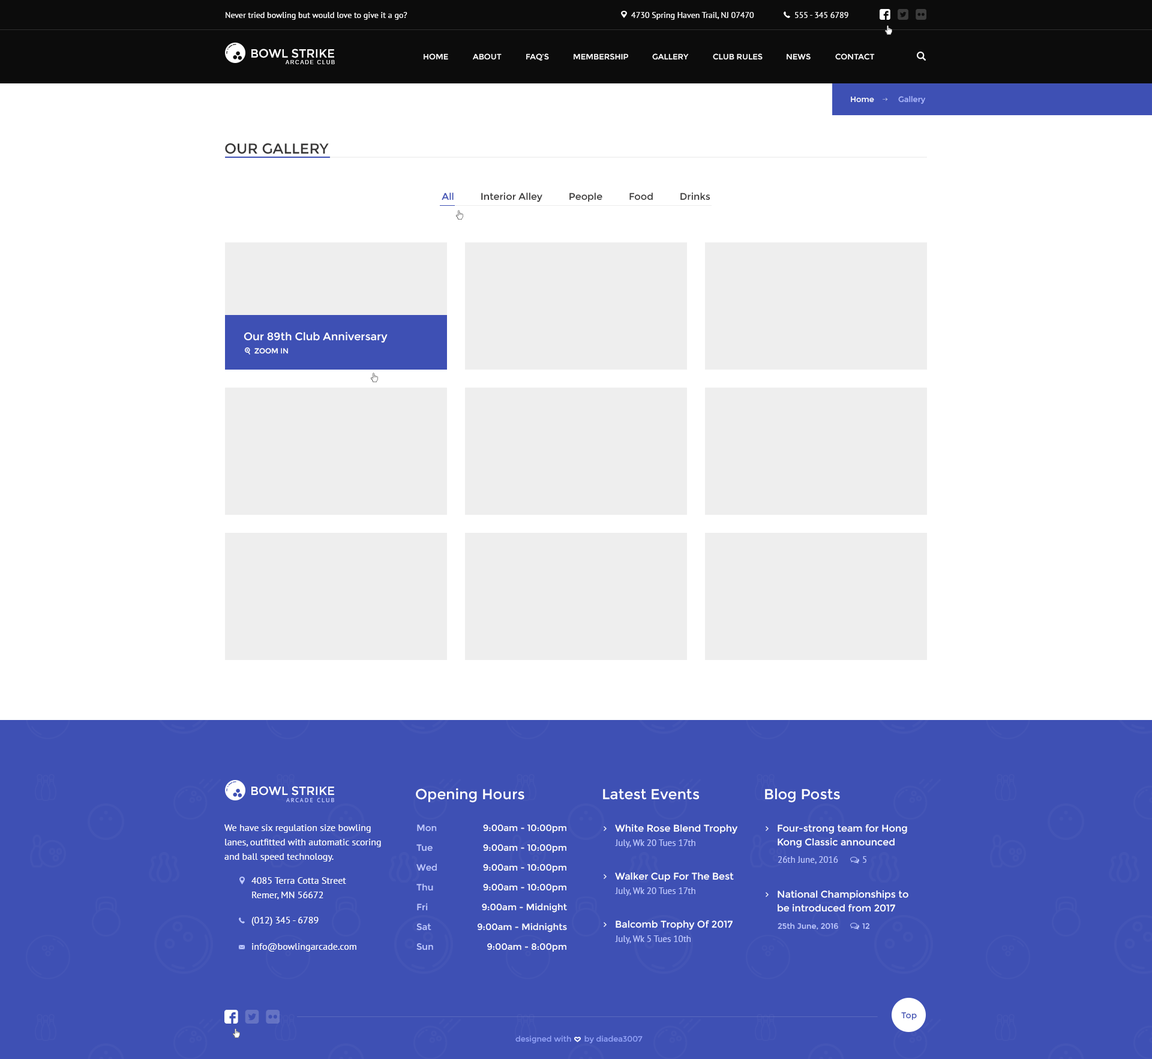
<style>
.page{position:relative;width:1152px;height:1059px;background:#ffffff}
.page>*{position:absolute;margin:0}
.t1{font:8.4px "PTSans-Regular";color:#ffffff}
.t2{font:12px "Montserrat-Regular";color:#ffffff;text-transform:uppercase}
.t3{font:7.8px "Montserrat-Regular";color:#ffffff;text-transform:uppercase}
.t4{font:5.4px "Arimo";letter-spacing:0.2em;color:#ffffff;text-transform:uppercase}
.t5{font:7.8px "Montserrat-Regular";color:#ffffff}
.t6{font:7.8px "Montserrat-Regular";color:#acb9ff}
.t7{font:14.4px "Montserrat-Regular";color:#393838;text-transform:uppercase}
.t8{font:9.6px "Montserrat-Regular";color:#393838}
.t9{font:9.6px "Montserrat-Regular";color:#3e50b4}
.t10{font:10.8px "Montserrat-Regular";color:#ffffff}
.t11{font:7.2px "Montserrat-Regular";color:#ffffff;text-transform:uppercase}
.t12{font:6px "PTSans-Regular";letter-spacing:0.2em;color:#bfc9ff;text-transform:uppercase}
.t13{font:14.4px "Montserrat-Regular";color:#ffffff}
.t14{font:9.6px/14.4px "PTSans-Regular";color:#ffffff}
.t15{font:9px/19.8px "Montserrat-Regular";color:#bfc9ff}
.t16{font:9px/19.8px "Montserrat-Regular";color:#ffffff}
.t17{font:9.6px "Montserrat-Regular";color:#ffffff}
.t18{font:9.6px/13.8px "Montserrat-Regular";color:#ffffff}
.t19{font:9px "PTSans-Regular";color:#bfc9ff}
.t20{font:9px "PTSans-Regular";color:#bfc9ff;text-transform:uppercase}
.t21{font:9.6px "PTSans-Regular";color:#ffffff}
.t22{font:7.8px "Montserrat-Regular";color:#bfc9ff}
.t23{font:7.8px "Montserrat-Regular";color:#bfc9ff;text-transform:uppercase}
.t24{font:8.4px "Montserrat-Regular";color:#3e50b4}
.t25{font:7.8px "Montserrat-Regular";color:#91a1f7}
</style>
<div class="page">
<p class="t1" style="left:226px;top:12px;width:181px;height:8px">Never tried bowling but would love to give it a go?</p>
<p class="t1" style="left:631px;top:12px;width:123px;height:8px">4730 Spring Haven Trail, NJ 07470</p>
<p class="t1" style="left:795px;top:12px;width:53px;height:6px">555 - 345 6789</p>
<p class="t2" style="left:251px;top:49px;width:83px;height:9px">Bowl Strike</p>
<p class="t3" style="left:424px;top:53px;width:24px;height:7px">Home</p>
<p class="t3" style="left:473px;top:53px;width:29px;height:7px">About</p>
<p class="t3" style="left:526px;top:53px;width:23px;height:8px">FAQ’s</p>
<p class="t3" style="left:574px;top:53px;width:54px;height:7px">membership</p>
<p class="t3" style="left:652px;top:53px;width:37px;height:7px">Gallery</p>
<p class="t3" style="left:713px;top:53px;width:50px;height:7px">club rules</p>
<p class="t3" style="left:787px;top:53px;width:24px;height:7px">News</p>
<p class="t3" style="left:835px;top:53px;width:40px;height:7px">contact</p>
<p class="t4" style="left:286px;top:60px;width:49px;height:4px">arcade Club</p>
<p class="t5" style="left:851px;top:97px;width:23px;height:6px">Home</p>
<p class="t6" style="left:898px;top:96px;width:27px;height:8px">Gallery</p>
<p class="t7" style="left:225px;top:143px;width:104px;height:11px">Our Gallery</p>
<p class="t8" style="left:442px;top:192px;width:268px;height:10px"><span class="t9">All   </span>       Interior Alley          People          Food          Drinks</p>
<p class="t10" style="left:244px;top:332px;width:144px;height:11px">Our 89th Club Anniversary</p>
<p class="t11" style="left:254px;top:348px;width:34px;height:6px">Zoom In</p>
<p class="t2" style="left:251px;top:786px;width:83px;height:10px">Bowl strike</p>
<p class="t12" style="left:286px;top:798px;width:48px;height:4px">arcade Club</p>
<p class="t13" style="left:416px;top:788px;width:108px;height:15px">Opening Hours</p>
<p class="t13" style="left:603px;top:789px;width:96px;height:11px">Latest Events</p>
<p class="t13" style="left:765px;top:788px;width:75px;height:15px">Blog Posts</p>
<p class="t14" style="left:224px;top:824px;width:157px;height:38px">We have six regulation size bowling lanes, outfitted with automatic scoring and ball speed technology.</p>
<p class="t15" style="left:416px;top:824px;width:21px;height:126px">Mon<br>Tue<br>Wed<br>Thu<br>Fri<br>Sat<br>Sun</p>
<p class="t16" style="left:477px;top:824px;width:90px;height:128px;text-align:right">9:00am - 10:00pm<br>9:00am - 10:00pm<br>9:00am - 10:00pm<br>9:00am - 10:00pm<br>9:00am - Midnight<br>9:00am - Midnights<br>9:00am - 8:00pm</p>
<p class="t17" style="left:615px;top:824px;width:122px;height:10px">White Rose Blend Trophy</p>
<p class="t18" style="left:778px;top:824px;width:129px;height:24px">Four-strong team for Hong Kong Classic announced</p>
<p class="t19" style="left:615px;top:839px;width:80px;height:9px">July, Wk 20 Tues 17th</p>
<p class="t19" style="left:778px;top:856px;width:60px;height:8px">26th June, 2016</p>
<p class="t20" style="left:863px;top:856px;width:3px;height:7px">5</p>
<p class="t14" style="left:251px;top:877px;width:95px;height:22px">4085 Terra Cotta Street<br>Remer, MN 56672</p>
<p class="t17" style="left:615px;top:872px;width:119px;height:10px">Walker Cup For The Best</p>
<p class="t19" style="left:615px;top:887px;width:80px;height:9px">July, Wk 20 Tues 17th</p>
<p class="t18" style="left:778px;top:890px;width:130px;height:22px">National Championships to be introduced from 2017</p>
<p class="t21" style="left:251px;top:917px;width:68px;height:9px">(012) 345 - 6789</p>
<p class="t17" style="left:616px;top:920px;width:117px;height:10px">Balcomb Trophy Of 2017</p>
<p class="t22" style="left:778px;top:923px;width:60px;height:7px">25th June, 2016</p>
<p class="t23" style="left:862px;top:923px;width:8px;height:6px">12</p>
<p class="t19" style="left:615px;top:935px;width:76px;height:9px">July, Wk 5 Tues 10th</p>
<p class="t21" style="left:252px;top:943px;width:104px;height:9px">info@bowlingarcade.com</p>
<p class="t24" style="left:901px;top:1012px;width:16px;height:8px">Top</p>
<p class="t25" style="left:515px;top:1036px;width:128px;height:7px">designed with      by diadea3007</p>
</div>
